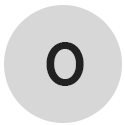
<style>
.page{position:relative;width:125px;height:125px;background:#d7d7d7}
.page>*{position:absolute;margin:0}
.t1{font:61px "GothamMedium";color:#212121}
</style>
<div class="page">
<p class="t1" style="left:46px;top:42px;width:38px;height:44px">0</p>
</div>
